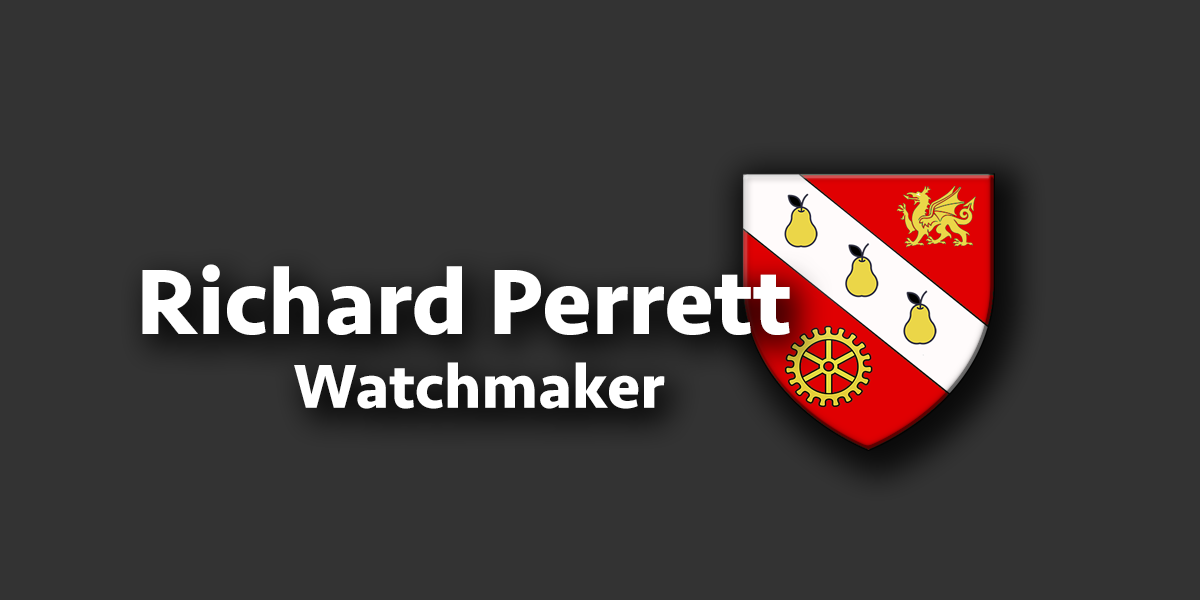
<style>
.page{position:relative;width:1200px;height:600px;background:#333333}
.page>*{position:absolute;margin:0}
.t1{font:96px "Seravek-Bold";color:#ffffff}
.t2{font:64px "Seravek-Bold";color:#ffffff}
</style>
<div class="page">
<p class="t1" style="left:142px;top:264px;width:648px;height:71px">Richard Perrett</p>
<p class="t2" style="left:294px;top:362px;width:371px;height:47px">Watchmaker</p>
</div>
